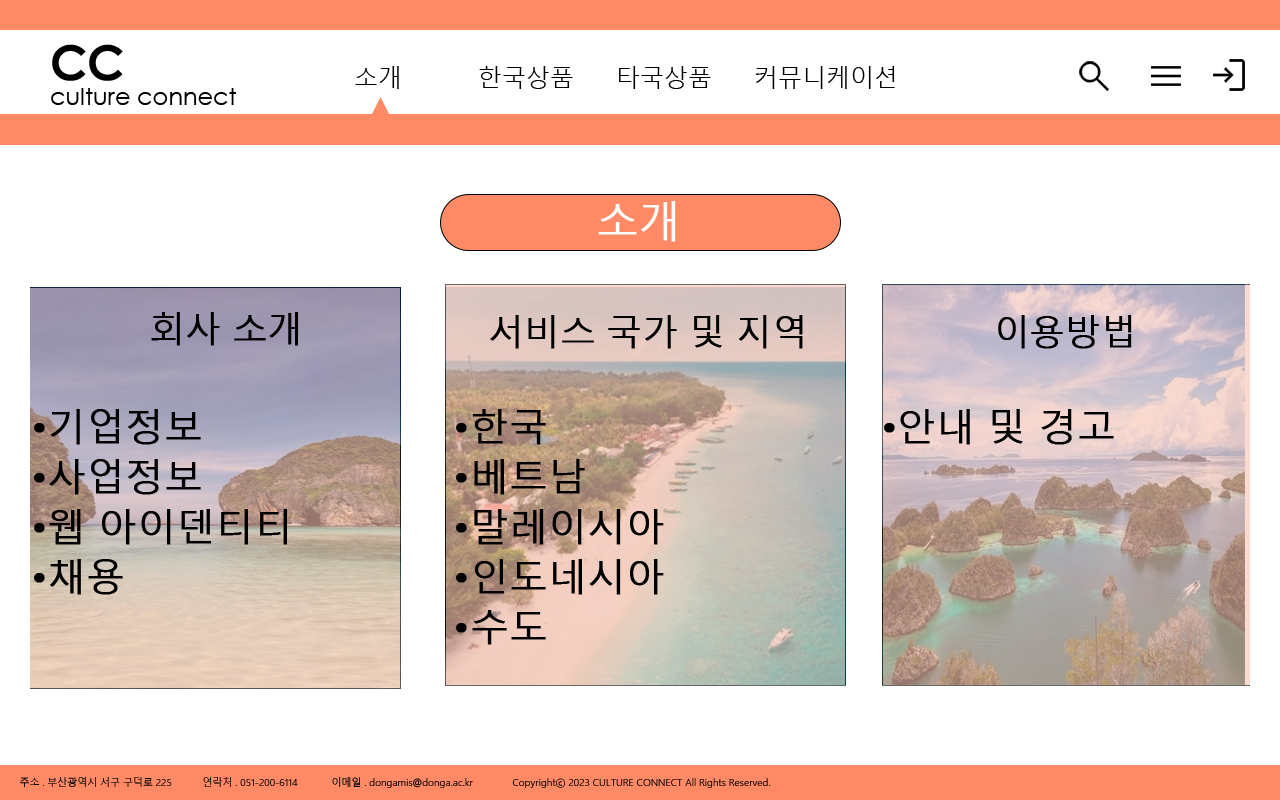
<style>
.page{position:relative;width:1280px;height:800px;background:#ffffff}
.page>*{position:absolute;margin:0}
.t1{font:12px "CenturyGothic-Bold";color:#000000}
.t2{font:48px "CenturyGothic-Bold";color:#000000}
.t3{font:30px "CenturyGothic-Bold";color:#000000}
.t4{font:150px "CenturyGothic-Bold";color:#000000}
.t5{font:24px "MalgunGothic-Semilight";color:#000000}
.t6{font:24px "CenturyGothic";color:#000000}
.t7{font:41.7px "MalgunGothic-Semilight";color:#ffffff;font-weight:bold}
.t8{font:35px "MalgunGothic-Semilight";color:#000000;font-weight:bold}
.t9{font:38px/50px "MalgunGothic-Semilight";color:#000000;font-weight:bold}
.t10{font:38px "MalgunGothic-Semilight";color:#000000;font-weight:bold}
.t11{font:10px "MalgunGothic-Semilight";color:#000000}
.t12{font:10px "MalgunGothic-Semilight"}
</style>
<div class="page">
<p class="t1" style="left:52px;top:44px;width:71px;height:37px"><span class="t2">CC<br><br></span><span class="t3"><br><br>cccc</span>ccccCs<span class="t4">C</span></p>
<p class="t5" style="left:355px;top:66px;width:44px;height:23px">소개</p>
<p class="t5" style="left:479px;top:66px;width:94px;height:23px">한국상품</p>
<p class="t5" style="left:619px;top:66px;width:92px;height:23px">타국상품</p>
<p class="t5" style="left:755px;top:66px;width:140px;height:23px">커뮤니케이션</p>
<p class="t6" style="left:51px;top:88px;width:186px;height:17px">culture connect</p>
<p class="t7" style="left:598px;top:201px;width:78px;height:41px">소개</p>
<p class="t8" style="left:151px;top:312px;width:147px;height:34px">회사 소개</p>
<p class="t8" style="left:490px;top:315px;width:313px;height:34px">서비스 국가 및 지역</p>
<p class="t8" style="left:998px;top:315px;width:134px;height:34px">이용방법</p>
<p class="t9" style="left:34px;top:409px;width:253px;height:186px;text-align:justify">•기업정보<br>•사업정보<br>•웹 아이덴티티<br>•채용</p>
<p class="t9" style="left:456px;top:409px;width:208px;height:236px;text-align:justify">•한국<br>•베트남<br>•말레이시아<br>•인도네시아<br>•수도</p>
<p class="t10" style="left:884px;top:409px;width:230px;height:36px">•안내 및 경고</p>
<p class="t11" style="left:20px;top:777px;width:152px;height:11px">주소 . 부산광역시 서구 구덕로 225</p>
<p class="t12" style="left:203px;top:777px;width:95px;height:10px">연락처 . 051-200-6114</p>
<p class="t11" style="left:332px;top:777px;width:141px;height:11px">이메일 . dongamis@donga.ac.kr</p>
<p class="t11" style="left:512px;top:778px;width:259px;height:10px">Copyrightⓒ 2023 CULTURE CONNECT All Rights Reserved.</p>
</div>
